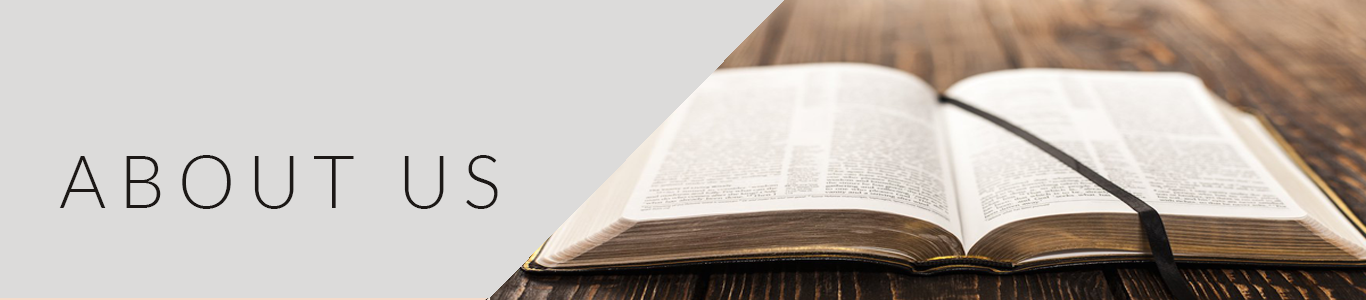
<style>
.page{position:relative;width:1366px;height:300px;background:#dcdbda}
.page>*{position:absolute;margin:0}
.t1{font:72px "Lato-Light";letter-spacing:0.18em;color:#1c1816;text-transform:uppercase}
</style>
<div class="page">
<p class="t1" style="left:59px;top:155px;width:439px;height:54px">About Us</p>
</div>
